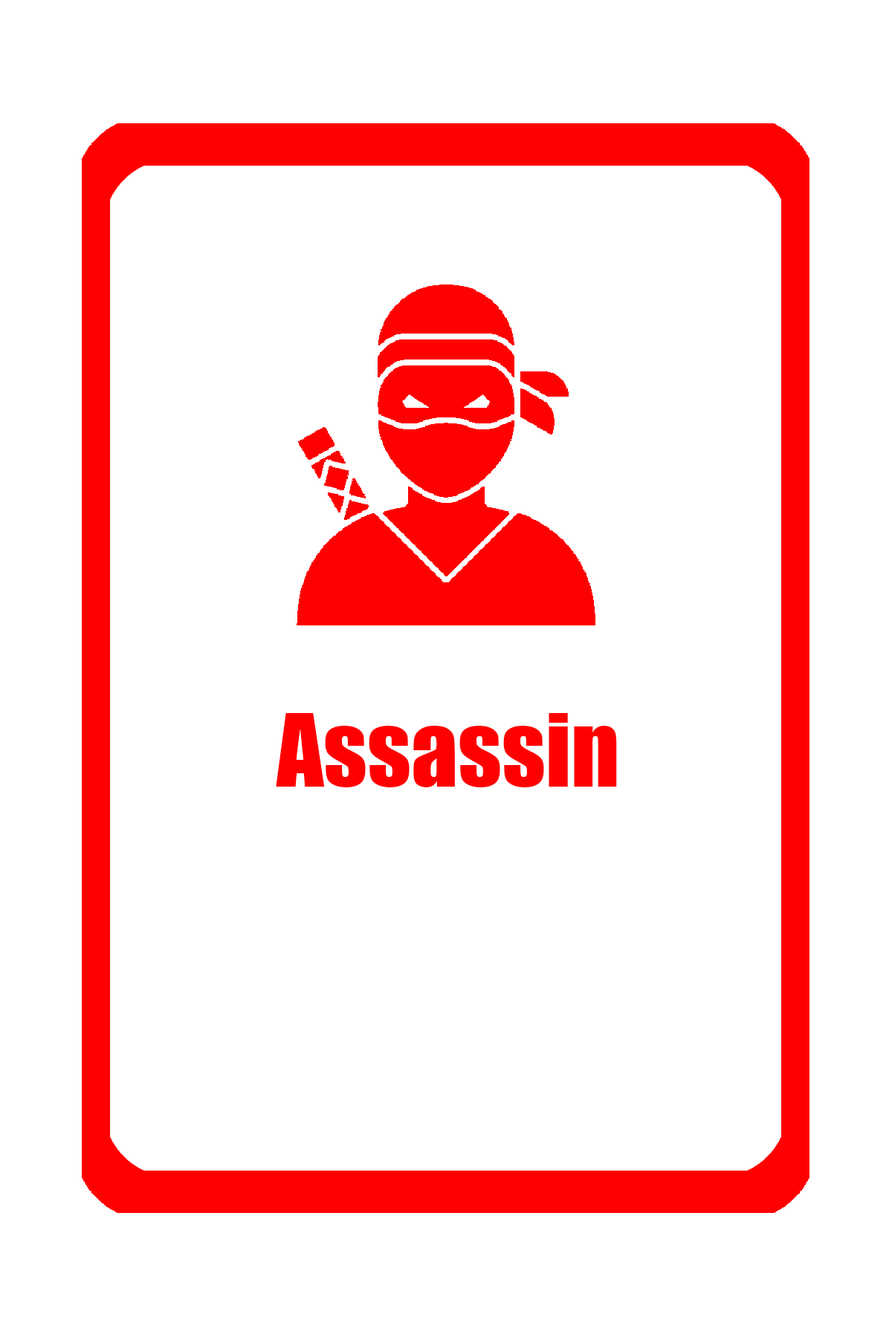
<style>
.page{position:relative;width:892px;height:1337px;background:#ffffff}
.page>*{position:absolute;margin:0}
.t1{font:92.9px "Impact";color:#ff0000}
</style>
<div class="page">
<p class="t1" style="left:276px;top:713px;width:341px;height:75px">Assassin</p>
</div>
